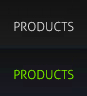
<style>
.page{position:relative;width:87px;height:96px}
.page>*{position:absolute;margin:0}
.t1{font:12.6px "Aller-Light";color:#ebe8d0}
.t2{font:12.6px "Aller-Light";color:#83f901}
</style>
<div class="page">
<p class="t1" style="left:14px;top:21px;width:60px;height:11px">PRODUCTS</p>
<p class="t2" style="left:14px;top:69px;width:60px;height:11px">PRODUCTS</p>
</div>
